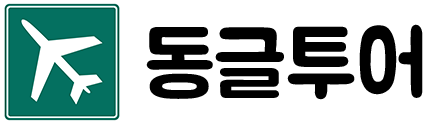
<style>
.page{position:relative;width:428px;height:126px;background:#ffffff}
.page>*{position:absolute;margin:0}
.t1{font:90.1px "BMJUA";color:#000000}
</style>
<div class="page">
<p class="t1" style="left:146px;top:24px;width:277px;height:76px">동글투어</p>
</div>
